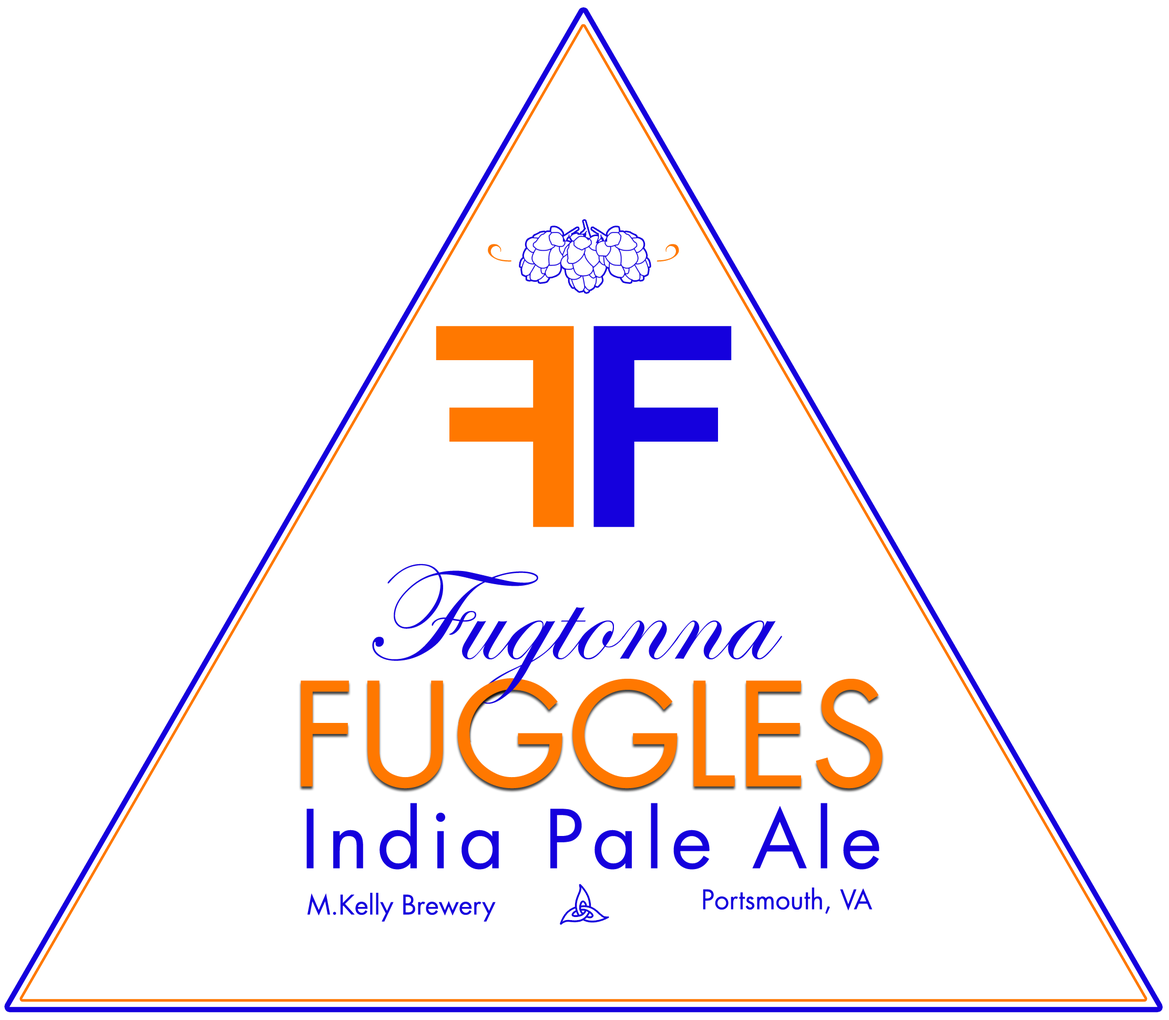
<style>
.page{position:relative;width:1169px;height:1020px;background:#ffffff}
.page>*{position:absolute;margin:0}
.t1{font:280.4px "Arial-BoldMT";letter-spacing:0.075em;color:#ff7800}
.t2{font:280.4px "Arial-BoldMT";letter-spacing:0.075em;color:#1500dd}
.t3{font:140.2px "EdwardianScriptITC";color:#1500dd}
.t4{font:140.2px "FuturaLT-Book";color:#ff7800}
.t5{font:78.9px "FuturaLT-Book";letter-spacing:0.1em;color:#1500dd}
.t6{font:26.3px "FuturaLT-Book";color:#1500dd}
</style>
<div class="page">
<p class="t1" style="left:436px;top:326px;width:138px;height:201px;rotate:180deg">F</p>
<p class="t2" style="left:594px;top:326px;width:138px;height:201px">F</p>
<p class="t3" style="left:372px;top:564px;width:410px;height:140px">Fugtonna</p>
<p class="t4" style="left:301px;top:679px;width:582px;height:110px">FUGGLES</p>
<p class="t5" style="left:306px;top:803px;width:574px;height:67px">India Pale Ale</p>
<p class="t6" style="left:308px;top:893px;width:188px;height:29px">M.Kelly Brewery</p>
<p class="t6" style="left:703px;top:887px;width:170px;height:27px">Portsmouth, VA</p>
</div>
